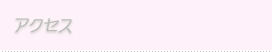
<style>
.page{position:relative;width:272px;height:52px;background:#fef1f9}
.page>*{position:absolute;margin:0}
.t1{font:16px "YentiEGP-Medium-SJIS";color:#bcbcbc;font-weight:bold;font-style:italic}
</style>
<div class="page">
<p class="t1" style="left:15px;top:18px;width:57px;height:15px">アクセス</p>
</div>
